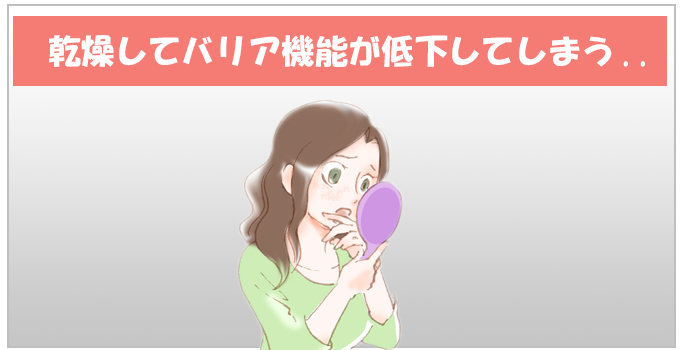
<style>
.page{position:relative;width:680px;height:350px}
.page>*{position:absolute;margin:0}
.t1{font:33.3px "HGSoeiKakupoptai";color:#ffffff}
</style>
<div class="page">
<p class="t1" style="left:49px;top:35px;width:596px;height:32px">乾燥してバリア機能が低下してしまう..</p>
</div>
